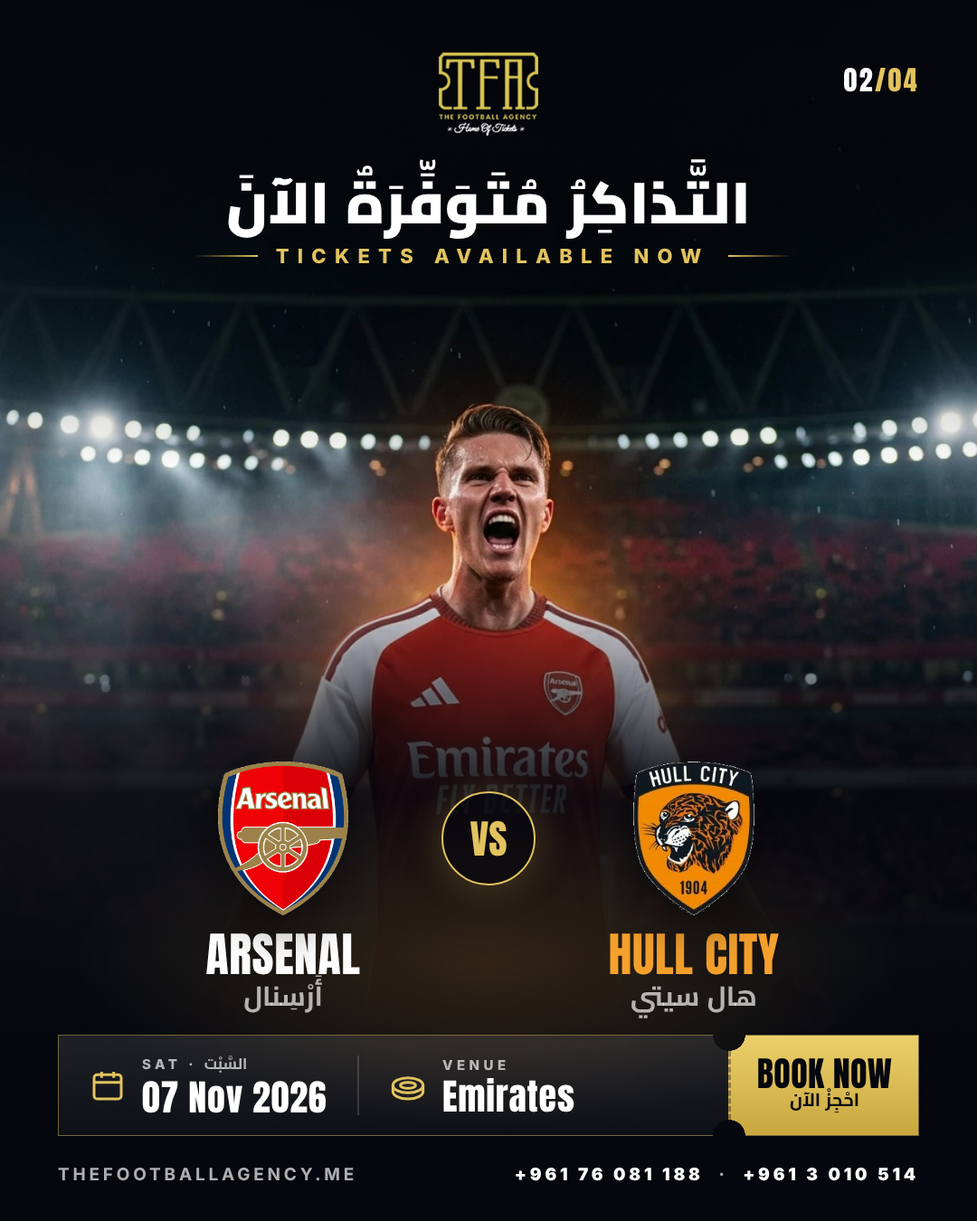
<style>
.page{position:relative;width:977px;height:1221px}
.page>*{position:absolute;margin:0}
.t1{font:27.1px "Anton-Regular";letter-spacing:0.08em;color:#e2c35f}
.t2{font:27.1px "Anton-Regular";letter-spacing:0.08em;color:#ffffff}
.t3{font:57.9px "Cairo-Black";color:#ffffff}
.t4{font:19.9px "Inter-ExtraBold";letter-spacing:0.42em;color:#e2c35f}
.t5{font:39.8px "Anton-Regular";color:#e2c35f}
.t6{font:47px "Anton-Regular";letter-spacing:0.01em;color:#ffffff}
.t7{font:47px "Anton-Regular";letter-spacing:0.01em;color:#f5a12d}
.t8{font:27.1px "Cairo-Bold"}
.t9{font:15.4px "Cairo-Bold"}
.t10{font:13.6px "Inter-ExtraBold";letter-spacing:0.3em}
.t11{font:34.4px "Anton-Regular";letter-spacing:0.01em;color:#05070e}
.t12{font:36.2px "Anton-Regular";letter-spacing:0.02em;color:#ffffff}
.t13{font:18.1px "Cairo-Bold";color:#05070e}
.t14{font:17.2px "Inter-Bold";letter-spacing:0.2em}
.t15{font:17.2px "Inter-ExtraBold";letter-spacing:0.2em;color:#ffffff}
.t16{font:17.2px "Inter-Bold";letter-spacing:0.2em;color:#ffffff}
</style>
<div class="page">
<p class="t1" style="left:844px;top:68px;width:73px;height:24px"><span class="t2">02</span>/04</p>
<p class="t3" style="left:228px;top:159px;width:518px;height:80px">التَّذاكِرُ مُتَوَفِّرَةٌ الآنَ</p>
<p class="t4" style="left:276px;top:248px;width:425px;height:16px">TICKETS AVAILABLE NOW</p>
<p class="t5" style="left:470px;top:820px;width:36px;height:36px">VS</p>
<p class="t6" style="left:206px;top:933px;width:154px;height:42px">ARSENAL</p>
<p class="t7" style="left:610px;top:933px;width:169px;height:42px">HULL CITY</p>
<p class="t8" style="left:244px;top:975px;width:78px;height:38px">أَرْسِنال</p>
<p class="t8" style="left:631px;top:986px;width:124px;height:32px">هال سيتي</p>
<p class="t9" style="left:142px;top:1055px;width:104px;height:18px"><span class="t10">SAT · </span>السَّبْت</p>
<p class="t10" style="left:442px;top:1060px;width:64px;height:11px">VENUE</p>
<p class="t11" style="left:758px;top:1058px;width:134px;height:31px">BOOK NOW</p>
<p class="t12" style="left:142px;top:1081px;width:184px;height:32px">07 Nov 2026</p>
<p class="t12" style="left:443px;top:1078px;width:131px;height:34px">Emirates</p>
<p class="t13" style="left:790px;top:1088px;width:68px;height:25px">احْجِزْ الآن</p>
<p class="t14" style="left:58px;top:1168px;width:296px;height:13px">THEFOOTBALLAGENCY.ME</p>
<p class="t15" style="left:515px;top:1168px;width:400px;height:13px">+961 76 081 188<span class="t16">  ·  </span>+961 3 010 514</p>
</div>
